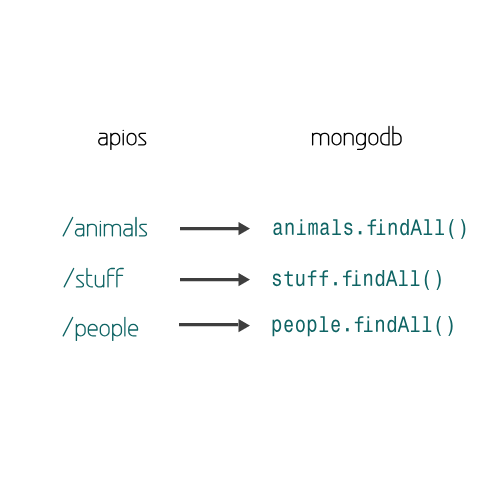
<style>
.page{position:relative;width:500px;height:500px;background:#ffffff}
.page>*{position:absolute;margin:0}
.t1{font:26px "GreyscaleBasic";color:#000000}
.t2{font:26px "GreyscaleBasic";color:#0f6464}
.t3{font:20px "MonospaceTypewriter";color:#0f6464}
</style>
<div class="page">
<p class="t1" style="left:311px;top:125px;width:91px;height:26px">mongodb</p>
<p class="t1" style="left:98px;top:129px;width:49px;height:22px">apios</p>
<p class="t2" style="left:62px;top:216px;width:86px;height:21px">/animals</p>
<p class="t3" style="left:273px;top:219px;width:193px;height:20px">animals.findAll()</p>
<p class="t2" style="left:63px;top:267px;width:61px;height:21px">/stuff</p>
<p class="t3" style="left:272px;top:270px;width:169px;height:20px">stuff.findAll()</p>
<p class="t2" style="left:62px;top:316px;width:77px;height:26px">/people</p>
<p class="t3" style="left:272px;top:316px;width:181px;height:21px">people.findAll()</p>
</div>
